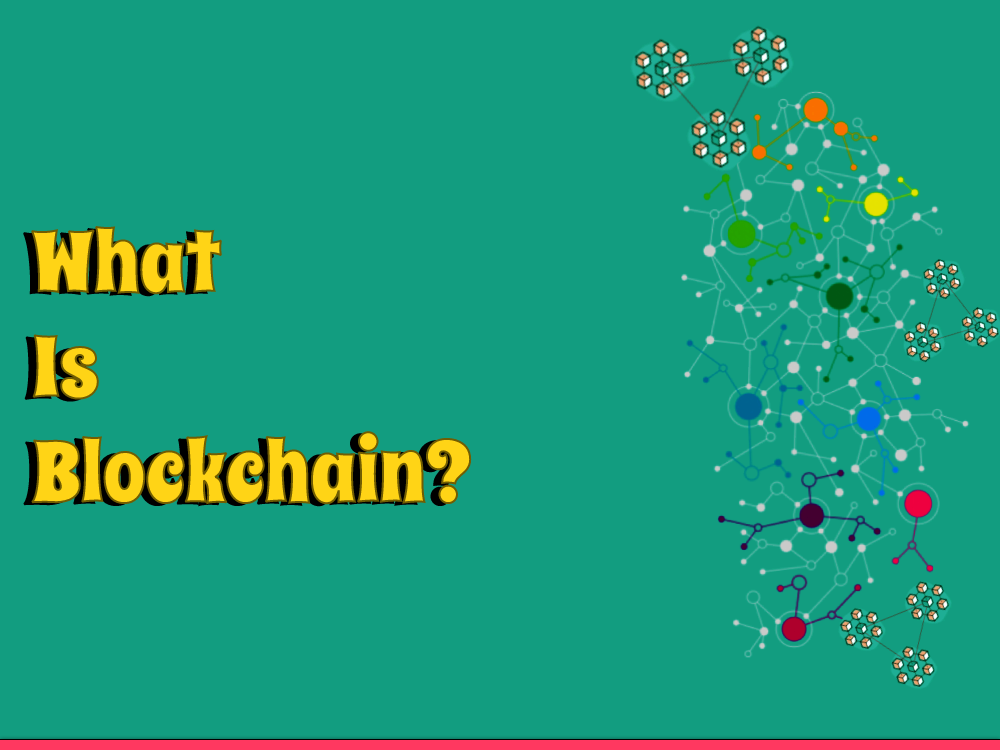
<style>
.page{position:relative;width:1000px;height:750px;background:#129d80}
.page>*{position:absolute;margin:0}
.t1{font:85px/105px "SpicyRice-Regular";color:#ffd416}
</style>
<div class="page">
<p class="t1" style="left:31px;top:226px;width:441px;height:279px">What<br>Is<br>Blockchain?</p>
</div>
